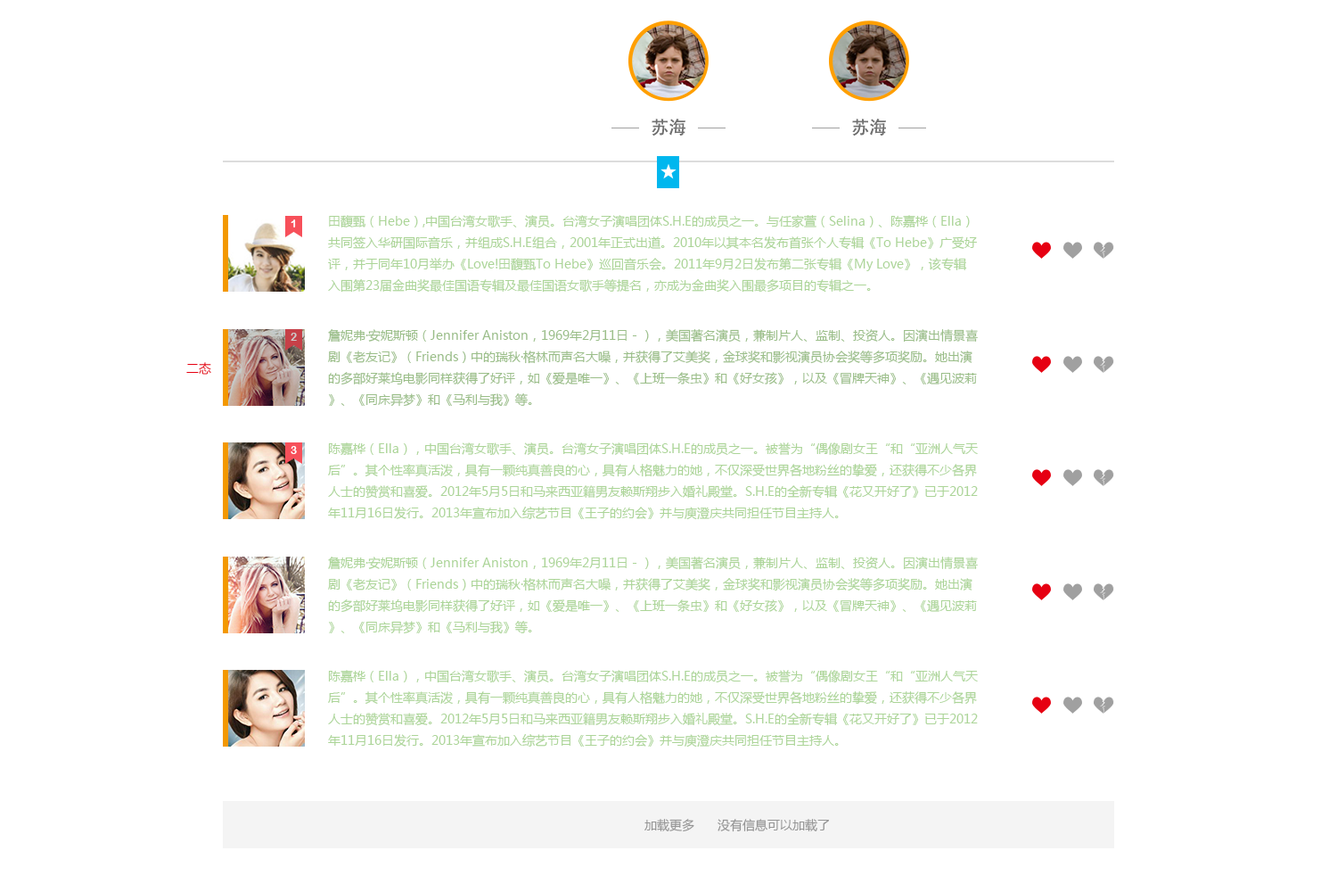
<style>
.page{position:relative;width:1337px;height:892px;background:#ffffff}
.page>*{position:absolute;margin:0}
.t1{font:17.7px "AdobeHeitiStd-Regular";color:#707070}
.t2{font:10.7px "ArialRoundedMTBold";color:#ffffff}
.t3{font:12.5px/21.4px "MicrosoftYaHei";color:#acd598}
.t4{font:12.5px/21.4px "MicrosoftYaHei";color:#9abe88}
.t5{font:10.7px "ArialRoundedMTBold";color:#cccccc}
.t6{font:12.5px "MicrosoftYaHei";color:#e60012}
.t7{font:12.5px "MicrosoftYaHei";color:#959595}
</style>
<div class="page">
<p class="t1" style="left:652px;top:119px;width:34px;height:17px">苏海</p>
<p class="t1" style="left:852px;top:119px;width:34px;height:17px">苏海</p>
<p class="t2" style="left:291px;top:219px;width:5px;height:8px">1</p>
<p class="t3" style="left:328px;top:215px;width:649px;height:77px">田馥甄（Hebe）,中国台湾女歌手、演员。台湾女子演唱团体S.H.E的成员之一。与任家萱（Selina）、陈嘉桦（Ella）共同签入华研国际音乐，并组成S.H.E组合，2001年正式出道。2010年以其本名发布首张个人专辑《To Hebe》广受好评，并于同年10月举办《Love!田馥甄To Hebe》巡回音乐会。2011年9月2日发布第二张专辑《My Love》，该专辑入围第23届金曲奖最佳国语专辑及最佳国语女歌手等提名，亦成为金曲奖入围最多项目的专辑之一。</p>
<p class="t4" style="left:328px;top:329px;width:650px;height:78px">詹妮弗·安妮斯顿（Jennifer Aniston，1969年2月11日－），美国著名演员，兼制片人、监制、投资人。因演出情景喜剧《老友记》（Friends）中的瑞秋·格林而声名大噪，并获得了艾美奖，金球奖和影视演员协会奖等多项奖励。她出演的多部好莱坞电影同样获得了好评，如《爱是唯一》、《上班一条虫》和《好女孩》，以及《冒牌天神》、《遇见波莉》、《同床异梦》和《马利与我》等。</p>
<p class="t5" style="left:291px;top:333px;width:6px;height:8px">2</p>
<p class="t6" style="left:186px;top:362px;width:25px;height:12px">二态</p>
<p class="t2" style="left:291px;top:446px;width:6px;height:8px">3</p>
<p class="t3" style="left:328px;top:442px;width:650px;height:78px">陈嘉桦（Ella），中国台湾女歌手、演员。台湾女子演唱团体S.H.E的成员之一。被誉为“偶像剧女王“和“亚洲人气天后”。其个性率真活泼，具有一颗纯真善良的心，具有人格魅力的她，不仅深受世界各地粉丝的挚爱，还获得不少各界人士的赞赏和喜爱。2012年5月5日和马来西亚籍男友赖斯翔步入婚礼殿堂。S.H.E的全新专辑《花又开好了》已于2012年11月16日发行。2013年宣布加入综艺节目《王子的约会》并与庾澄庆共同担任节目主持人。</p>
<p class="t3" style="left:328px;top:556px;width:650px;height:78px">詹妮弗·安妮斯顿（Jennifer Aniston，1969年2月11日－），美国著名演员，兼制片人、监制、投资人。因演出情景喜剧《老友记》（Friends）中的瑞秋·格林而声名大噪，并获得了艾美奖，金球奖和影视演员协会奖等多项奖励。她出演的多部好莱坞电影同样获得了好评，如《爱是唯一》、《上班一条虫》和《好女孩》，以及《冒牌天神》、《遇见波莉》、《同床异梦》和《马利与我》等。</p>
<p class="t3" style="left:328px;top:670px;width:650px;height:77px">陈嘉桦（Ella），中国台湾女歌手、演员。台湾女子演唱团体S.H.E的成员之一。被誉为“偶像剧女王“和“亚洲人气天后”。其个性率真活泼，具有一颗纯真善良的心，具有人格魅力的她，不仅深受世界各地粉丝的挚爱，还获得不少各界人士的赞赏和喜爱。2012年5月5日和马来西亚籍男友赖斯翔步入婚礼殿堂。S.H.E的全新专辑《花又开好了》已于2012年11月16日发行。2013年宣布加入综艺节目《王子的约会》并与庾澄庆共同担任节目主持人。</p>
<p class="t7" style="left:645px;top:818px;width:50px;height:14px">加载更多</p>
<p class="t7" style="left:718px;top:818px;width:111px;height:14px">没有信息可以加载了</p>
</div>
